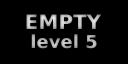
<style>
.page{position:relative;width:128px;height:64px;background:#000000}
.page>*{position:absolute;margin:0}
.t1{font:20px "BitstreamVeraSans-Bold";color:#c1c1c1}
.t2{font:18px "BitstreamVeraSans-Bold";color:#b1b1b1}
</style>
<div class="page">
<p class="t1" style="left:26px;top:14px;width:76px;height:15px">EMPTY</p>
<p class="t2" style="left:31px;top:34px;width:66px;height:15px">level 5</p>
</div>
